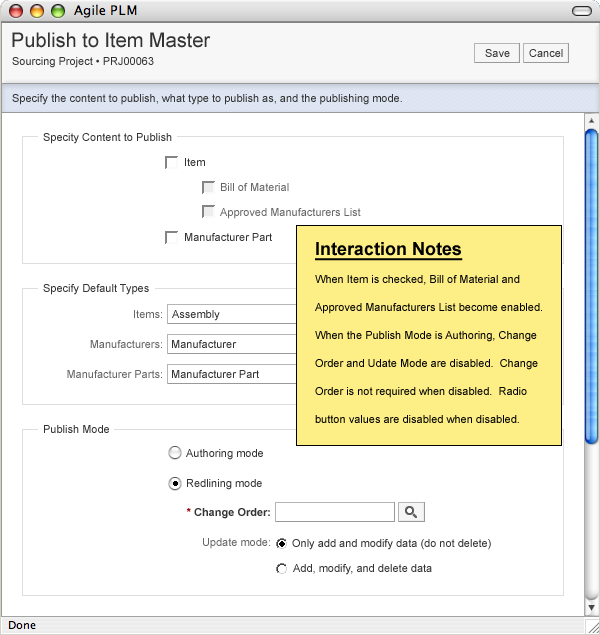
<style>
.page{position:relative;width:600px;height:635px;background:#ffffff}
.page>*{position:absolute;margin:0}
.t1{font:20px "ArialMT";color:#333333}
.t2{font:11px "ArialMT";color:#333333}
.t3{font:11px/25px "ArialMT";color:#666666}
.t4{font:11px/25px "ArialMT";color:#333333}
.t5{font:11px/20px "ArialMT";color:#000000}
.t6{font:18px/20px "Arial-BoldMT";color:#000000;text-decoration:underline}
.t7{font:11px "ArialMT";color:#666666}
.t8{font:11px "Arial-BoldMT";color:#333333}
.t9{font:11px "Arial-BoldMT";color:#990000}
</style>
<div class="page">
<p class="t1" style="left:12px;top:32px;width:199px;height:16px">Publish to Item Master</p>
<p class="t2" style="left:485px;top:49px;width:25px;height:8px">Save</p>
<p class="t2" style="left:529px;top:49px;width:34px;height:8px">Cancel</p>
<p class="t2" style="left:12px;top:57px;width:142px;height:11px">Sourcing Project • PRJ00063</p>
<p class="t2" style="left:12px;top:94px;width:390px;height:11px">Specify the content to publish, what type to publish as, and the publishing mode.</p>
<p class="t2" style="left:43px;top:133px;width:129px;height:11px">Specity Content to Publish</p>
<p class="t3" style="left:185px;top:158px;width:176px;height:83px"><span class="t4">Item<br> </span>Bill of Material<br> Approved Manufacturers List<br><span class="t4">Manufacturer Part</span></p>
<p class="t5" style="left:315px;top:242px;width:227px;height:181px"><span class="t6">Interaction Notes<br></span>When Item is checked, Bill of Material and <br>Approved Manufacturers List become enabled.<br>When the Publish Mode is Authoring, Change <br>Order and Udate Mode are disabled.  Change <br>Order is not required when disabled.  Radio <br>button values are disabled when disabled.</p>
<p class="t2" style="left:43px;top:284px;width:106px;height:11px">Specify Default Types</p>
<p class="t7" style="left:134px;top:310px;width:28px;height:8px">Items:</p>
<p class="t2" style="left:172px;top:310px;width:48px;height:11px">Assembly</p>
<p class="t7" style="left:90px;top:340px;width:72px;height:8px">Manufacturers:</p>
<p class="t2" style="left:172px;top:340px;width:65px;height:8px">Manufacturer</p>
<p class="t7" style="left:67px;top:370px;width:95px;height:8px">Manufacturer Parts:</p>
<p class="t2" style="left:172px;top:370px;width:87px;height:8px">Manufacturer Part</p>
<p class="t2" style="left:44px;top:425px;width:65px;height:8px">Publish Mode</p>
<p class="t2" style="left:186px;top:449px;width:77px;height:11px">Authoring mode</p>
<p class="t2" style="left:187px;top:479px;width:75px;height:11px">Redlining mode</p>
<p class="t8" style="left:186px;top:508px;width:84px;height:11px"><span class="t9">*</span> Change Order:</p>
<p class="t7" style="left:203px;top:538px;width:67px;height:11px">Update mode:</p>
<p class="t2" style="left:292px;top:539px;width:199px;height:11px">Only add and modify data (do not delete)</p>
<p class="t2" style="left:293px;top:564px;width:139px;height:11px">Add, modify, and delete data</p>
</div>
